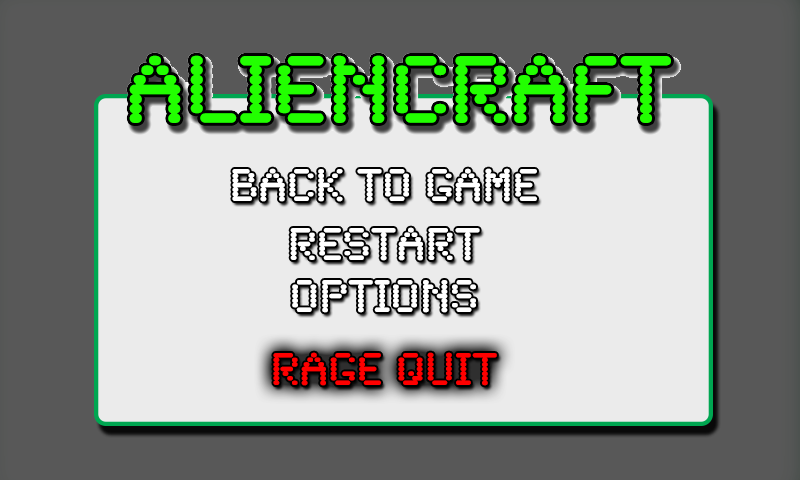
<style>
.page{position:relative;width:800px;height:480px;background:#ebebeb}
.page>*{position:absolute;margin:0}
.t1{font:48px "SynchroLET";color:#ffffff}
.t2{font:48px "SynchroLET";color:#ff0000}
</style>
<div class="page">
<p class="t1" style="left:232px;top:168px;width:305px;height:34px">BACK TO GAME</p>
<p class="t1" style="left:290px;top:227px;width:190px;height:34px">RESTART</p>
<p class="t1" style="left:292px;top:280px;width:184px;height:33px">OPTIONS</p>
<p class="t2" style="left:273px;top:352px;width:224px;height:34px">RAGE QUIT</p>
</div>
